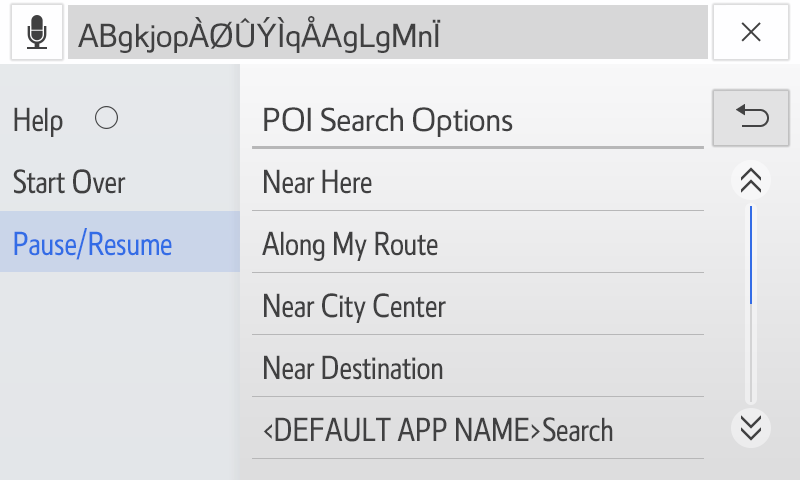
<style>
.page{position:relative;width:800px;height:480px}
.page>*{position:absolute;margin:0}
.t1{font:30px "Tfont1411_T1S";color:#404041}
.t2{font:30px "Tfont1411_T2S";color:#404041}
.t3{font:30px "Tfont1411_T1S";color:#404040}
.t4{font:30px/62px "Tfont1411_T2S";color:#404040}
.t5{font:30px "Tfont1411_T2S";color:#336ce6}
</style>
<div class="page">
<p class="t1" style="left:78px;top:16px;width:363px;height:37px">ABgkjopÀØÛÝÌqÅAgLgMnÏ</p>
<p class="t2" style="left:14px;top:107px;width:49px;height:30px">Help</p>
<p class="t3" style="left:264px;top:107px;width:249px;height:30px">POI Search Options</p>
<p class="t2" style="left:13px;top:169px;width:113px;height:25px">Start Over</p>
<p class="t4" style="left:262px;top:169px;width:351px;height:273px">Near Here<br>Along My Route<br>Near City Center<br>Near Destination<br>&lt;DEFAULT APP NAME&gt;Search</p>
<p class="t5" style="left:14px;top:228px;width:158px;height:32px">Pause/Resume</p>
</div>
